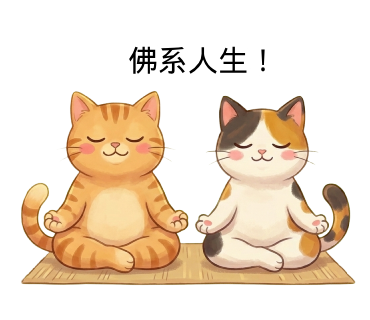
<style>
.page{position:relative;width:370px;height:320px;background:#ffffff}
.page>*{position:absolute;margin:0}
.t1{font:30px "DroidSansFallback";color:#000000}
</style>
<div class="page">
<p class="t1" style="left:129px;top:46px;width:136px;height:28px">佛系人生！</p>
</div>
